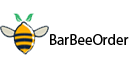
<style>
.page{position:relative;width:130px;height:65px;background:#ffffff}
.page>*{position:absolute;margin:0}
.t1{font:15px "MyriadPro-Regular";color:#000000}
</style>
<div class="page">
<p class="t1" style="left:50px;top:34px;width:79px;height:11px">BarBeeOrder</p>
</div>
